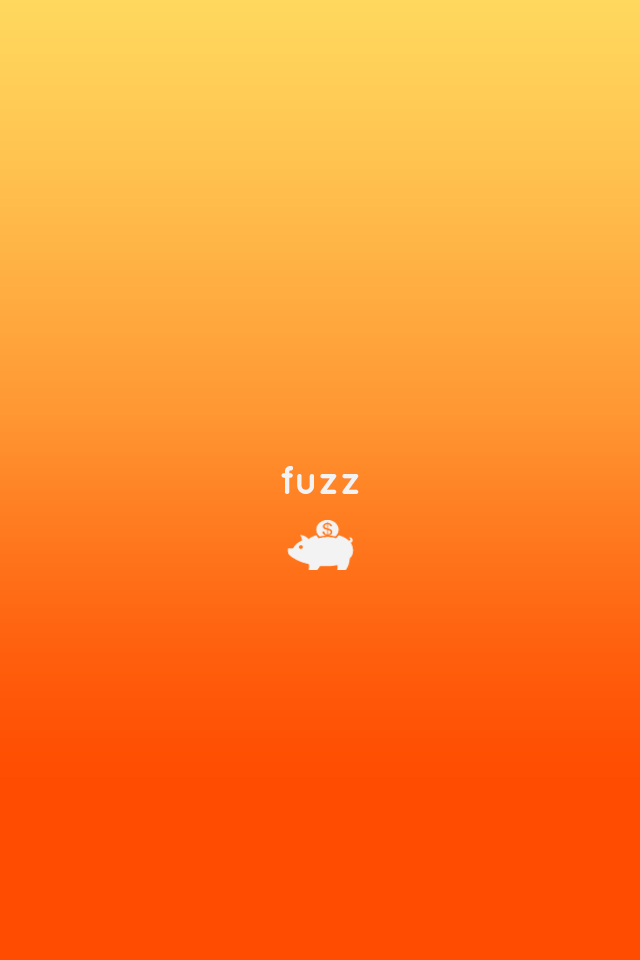
<style>
.page{position:relative;width:640px;height:960px}
.page>*{position:absolute;margin:0}
.t1{font:40px "Quicksand-Bold";color:#f3f3f3}
</style>
<div class="page">
<p class="t1" style="left:281px;top:466px;width:78px;height:28px">fuzz</p>
</div>
